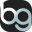
<style>
.page{position:relative;width:32px;height:32px;background:#222222}
.page>*{position:absolute;margin:0}
.t1{font:31.7px "Comfortaa";color:#ffffff;font-weight:bold}
.t2{font:31.7px "Comfortaa";color:#a5c3c3;font-weight:bold}
</style>
<div class="page">
<p class="t1" style="left:0px;top:1px;width:18px;height:24px">b</p>
<p class="t2" style="left:14px;top:8px;width:18px;height:24px">g</p>
</div>
